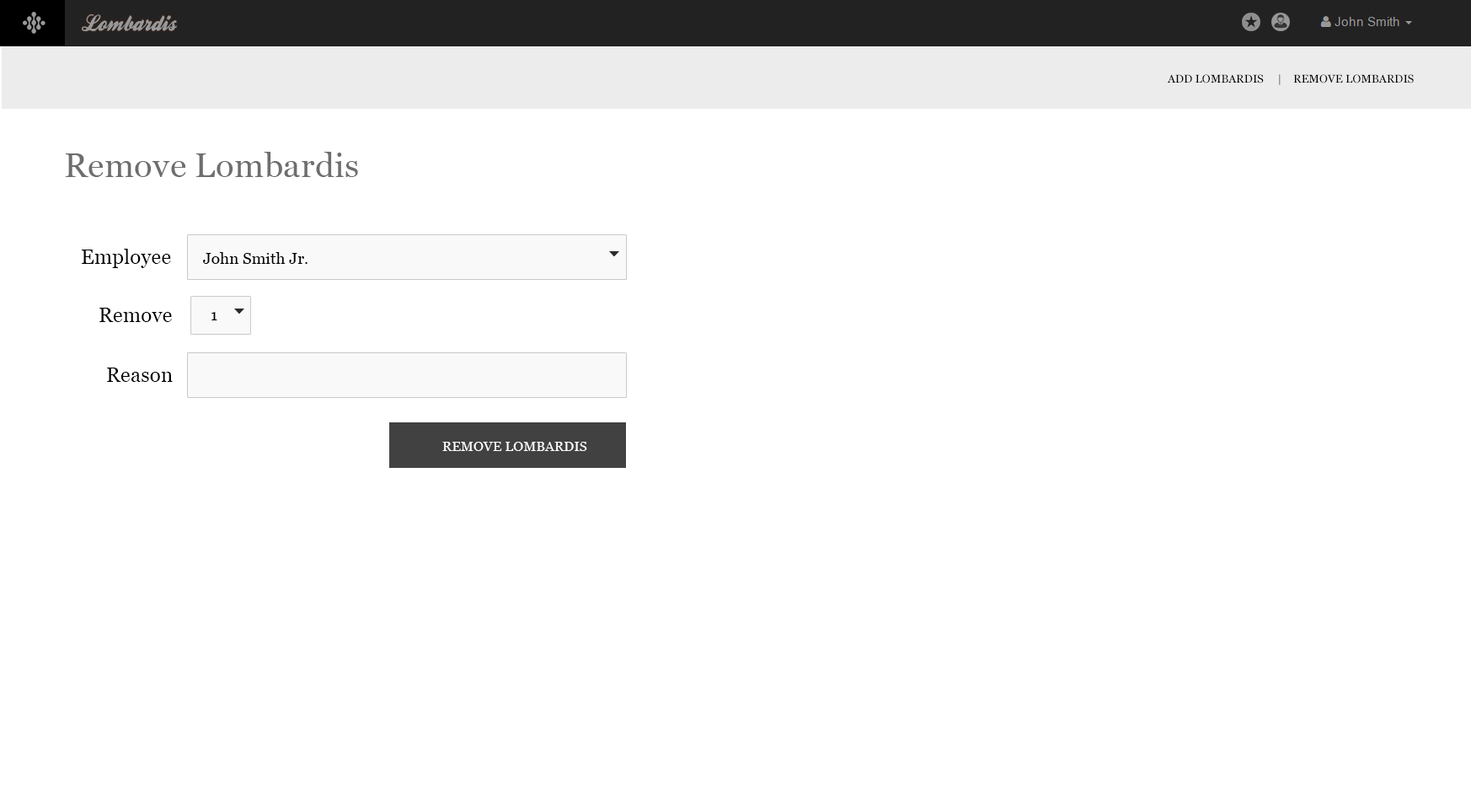
<style>
.page{position:relative;width:1471px;height:811px;background:#ffffff}
.page>*{position:absolute;margin:0}
.t1{font:23.4px "BallparkWeiner";color:#999999;scale:0.96 1}
.t2{font:11.2px "Georgia";letter-spacing:0.01em;color:#000000}
.t3{font:33.7px "Georgia";letter-spacing:0.01em;color:#6e6e6e}
.t4{font:20.2px "Georgia";letter-spacing:0.01em;color:#000000}
.t5{font:15.7px "Georgia";letter-spacing:0.01em;color:#000000}
.t6{font:13.5px "Georgia";letter-spacing:0.01em;color:#ffffff}
</style>
<div class="page">
<p class="t1" style="left:82px;top:14px;width:95px;height:17px">Lombardis</p>
<p class="t2" style="left:1167px;top:74px;width:247px;height:11px">ADD LOMBARDIS     |    REMOVE LOMBARDIS</p>
<p class="t3" style="left:65px;top:152px;width:293px;height:25px">Remove Lombardis</p>
<p class="t4" style="left:82px;top:249px;width:89px;height:19px">Employee</p>
<p class="t5" style="left:203px;top:252px;width:105px;height:12px">John Smith Jr.</p>
<p class="t4" style="left:99px;top:308px;width:73px;height:14px">Remove</p>
<p class="t5" style="left:211px;top:312px;width:6px;height:8px">1</p>
<p class="t4" style="left:107px;top:367px;width:66px;height:15px">Reason</p>
<p class="t6" style="left:442px;top:442px;width:145px;height:9px">REMOVE LOMBARDIS</p>
</div>
